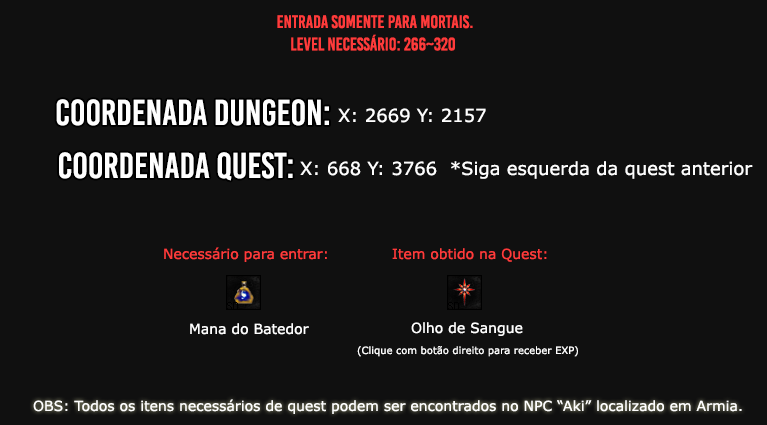
<style>
.page{position:relative;width:767px;height:425px;background:#101010}
.page>*{position:absolute;margin:0}
.t1{font:18px "BebasKai";color:#ff3b3b}
.t2{font:36px "BebasKai";color:#fefefe}
.t3{font:18px "Verdana";color:#fefefe}
.t4{font:14px "Verdana";color:#ff3b3b}
.t5{font:14px "Verdana";color:#fefefe}
.t6{font:10px "Verdana";color:#fefefe}
</style>
<div class="page">
<p class="t1" style="left:277px;top:15px;width:196px;height:14px">Entrada somente para mortais.</p>
<p class="t1" style="left:291px;top:34px;width:164px;height:17px">level necessário: 266~320</p>
<p class="t2" style="left:56px;top:99px;width:273px;height:27px">Coordenada dungeon:</p>
<p class="t3" style="left:338px;top:108px;width:148px;height:15px">X: 2669 Y: 2157</p>
<p class="t2" style="left:59px;top:152px;width:234px;height:29px">Coordenada quest:</p>
<p class="t3" style="left:300px;top:161px;width:453px;height:18px">X: 668 Y: 3766  *Siga esquerda da quest anterior</p>
<p class="t4" style="left:164px;top:247px;width:163px;height:15px">Necessário para entrar:</p>
<p class="t4" style="left:392px;top:248px;width:155px;height:14px">Item obtido na Quest:</p>
<p class="t5" style="left:190px;top:323px;width:119px;height:12px">Mana do Batedor</p>
<p class="t5" style="left:411px;top:322px;width:112px;height:14px">Olho de Sangue</p>
<p class="t6" style="left:357px;top:346px;width:221px;height:11px">(Clique com botão direito para receber EXP)</p>
<p class="t5" style="left:33px;top:399px;width:709px;height:15px">OBS: Todos os itens necessários de quest podem ser encontrados no NPC “Aki” localizado em Armia.</p>
</div>
